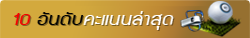
<style>
.page{position:relative;width:250px;height:38px;background:#d3a93d}
.page>*{position:absolute;margin:0}
.t1{font:18.9px "supermarket";letter-spacing:0.01em;color:#ffffff;font-style:italic;scale:1.19 1}
.t2{font:18.9px "supermarket";letter-spacing:0.01em;color:#f40000;font-style:italic;scale:1.19 1}
.t3{font:18.9px "supermarket";letter-spacing:0.01em;color:#020202;font-style:italic;scale:1.19 1}
</style>
<div class="page">
<p class="t1" style="left:14px;top:11px;width:160px;height:19px"><span class="t2">10 </span><span class="t3">อันดับ</span>คะแนนล่าสุด</p>
</div>
